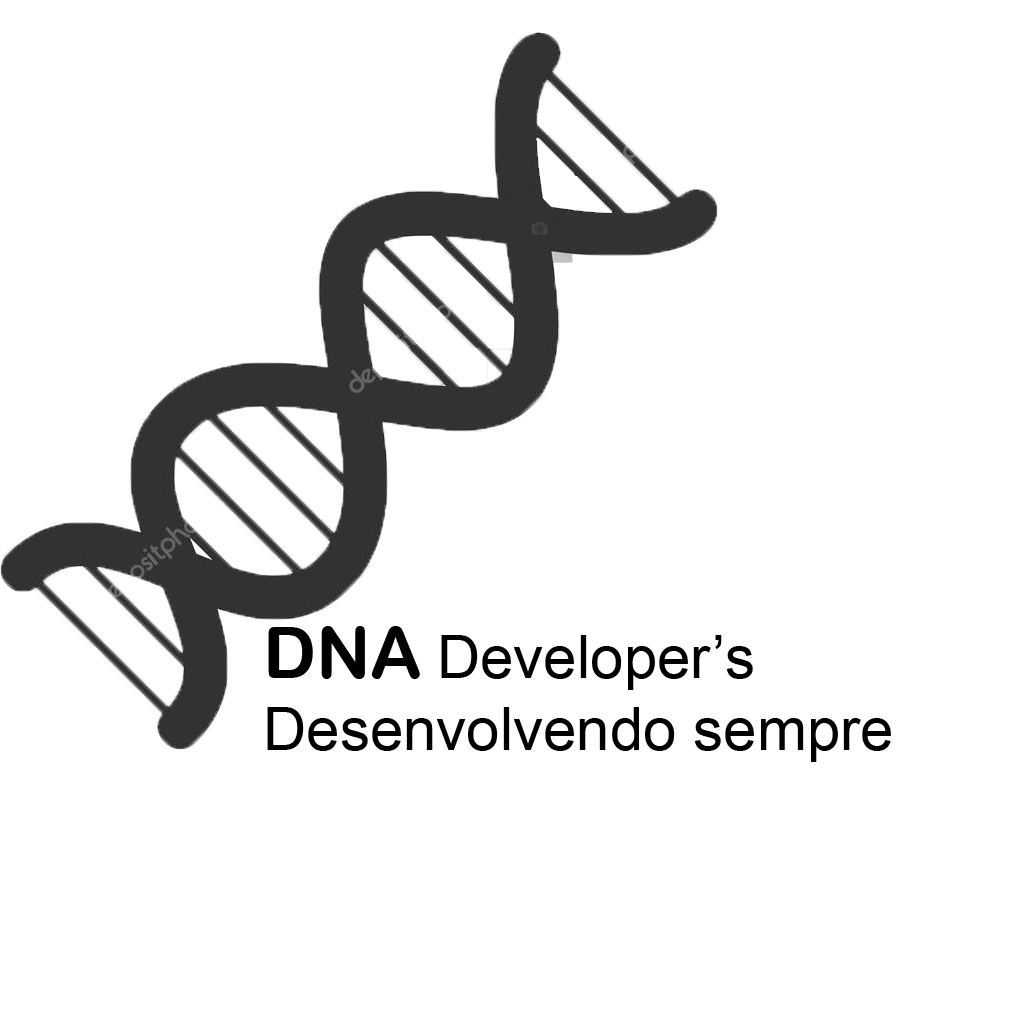
<style>
.page{position:relative;width:1024px;height:1024px;background:#ffffff}
.page>*{position:absolute;margin:0}
.t1{font:60px "ArialMT";color:#000000}
.t2{font:72px "ArialRoundedMTBold";color:#000000}
</style>
<div class="page">
<p class="t1" style="left:267px;top:626px;width:624px;height:136px"><span class="t2"><br>DNA </span>Developer’s <br>Desenvolvendo sempre</p>
</div>
